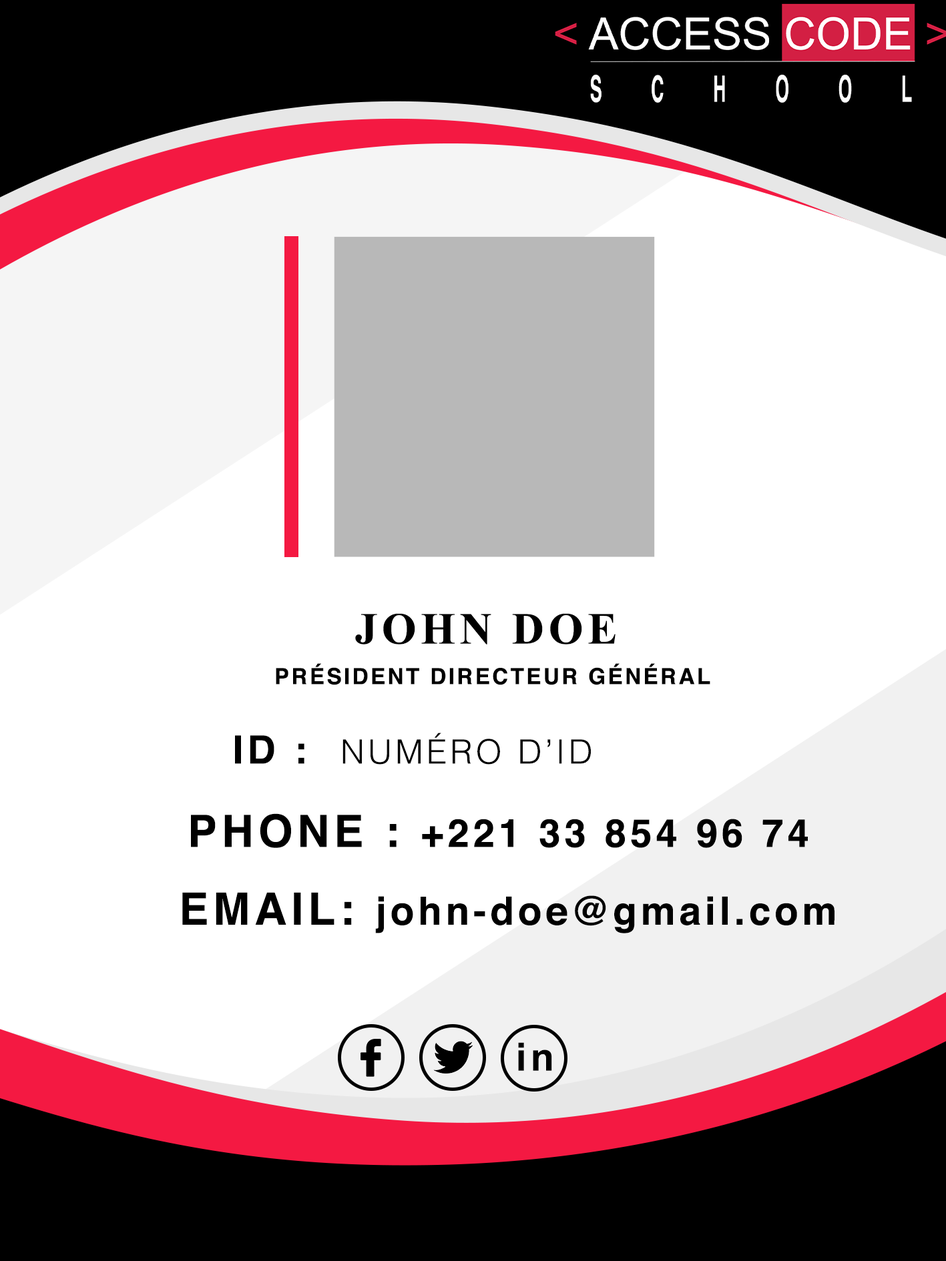
<style>
.page{position:relative;width:946px;height:1261px;background:#ffffff}
.page>*{position:absolute;margin:0}
.t1{font:44.5px "TimesNewRomanPS-BoldMT";letter-spacing:0.1em;color:#000000}
.t2{font:22.2px "Helvetica-Bold";letter-spacing:0.1em;color:#000000}
.t3{font:33.4px "Helvetica-Light";letter-spacing:0.1em;color:#000000}
.t4{font:38.9px "Helvetica-Bold";letter-spacing:0.1em;color:#000000}
.t5{font:44.5px "Helvetica-Bold";letter-spacing:0.1em;color:#000000}
.t6{font:38.9px "Arial-BoldMT";letter-spacing:0.1em;color:#000000}
</style>
<div class="page">
<p class="t1" style="left:355px;top:613px;width:260px;height:32px">JOHN DOE</p>
<p class="t2" style="left:276px;top:663px;width:434px;height:22px">PRÉSIDENT DIRECTEUR GÉNÉRAL</p>
<p class="t3" style="left:235px;top:733px;width:356px;height:32px"><span class="t4">ID :  </span>NUMÉRO D’ID</p>
<p class="t4" style="left:191px;top:813px;width:616px;height:35px"><span class="t5">PHONE : </span>+221 33 854 96 74</p>
<p class="t4" style="left:182px;top:892px;width:652px;height:42px"><span class="t5">EMAIL: </span>john-doe@gmail.com</p>
<p class="t6" style="left:518px;top:1042px;width:34px;height:29px">in</p>
</div>
